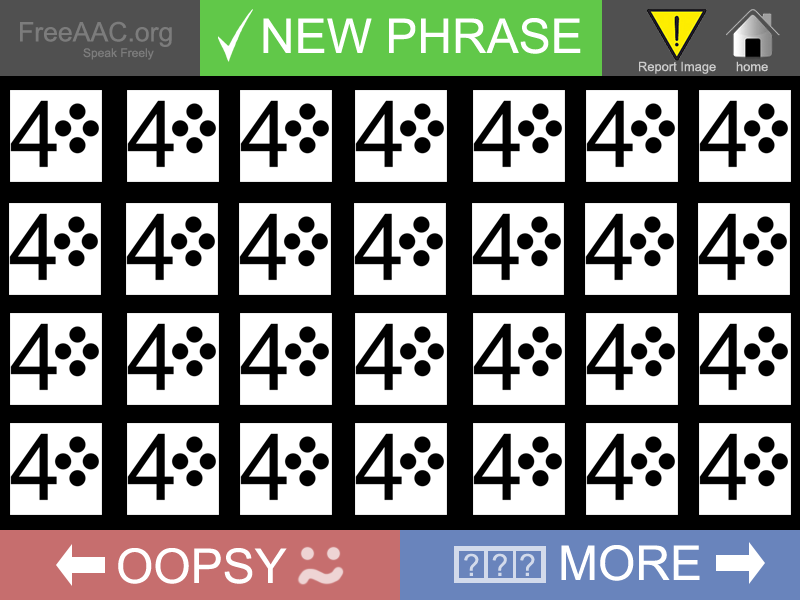
<style>
.page{position:relative;width:800px;height:600px;background:#000000}
.page>*{position:absolute;margin:0}
.t1{font:26.6px "ArialMT";color:#7c7c7c}
.t2{font:48px "ArialMT";color:#ffffff}
.t3{font:12px "ArialMT";color:#7c7c7c}
.t4{font:12.9px "ArialMT";color:#cbcbcb}
.t5{font:30.2px "ArialMT";color:#d2daeb}
</style>
<div class="page">
<p class="t1" style="left:20px;top:21px;width:152px;height:26px">FreeAAC.org</p>
<p class="t2" style="left:263px;top:18px;width:318px;height:36px">NEW PHRASE</p>
<p class="t3" style="left:83px;top:48px;width:71px;height:12px">Speak Freely</p>
<p class="t4" style="left:639px;top:61px;width:77px;height:13px">Report Image</p>
<p class="t4" style="left:736px;top:61px;width:32px;height:11px">home</p>
<p class="t2" style="left:561px;top:545px;width:139px;height:36px">MORE</p>
<p class="t2" style="left:118px;top:548px;width:169px;height:36px">OOPSY</p>
<p class="t5" style="left:464px;top:553px;width:15px;height:23px">?</p>
<p class="t5" style="left:492px;top:553px;width:15px;height:23px">?</p>
<p class="t5" style="left:520px;top:553px;width:15px;height:23px">?</p>
</div>
